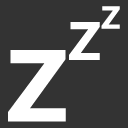
<style>
.page{position:relative;width:128px;height:128px;background:#333333}
.page>*{position:absolute;margin:0}
.t1{font:32px "SegoeUI-Bold";color:#ffffff}
.t2{font:54px "SegoeUI-Bold";color:#ffffff}
.t3{font:102px "SegoeUI-Bold";color:#ffffff}
</style>
<div class="page">
<p class="t1" style="left:101px;top:6px;width:19px;height:23px">Z</p>
<p class="t2" style="left:69px;top:22px;width:31px;height:38px">Z</p>
<p class="t3" style="left:8px;top:50px;width:58px;height:72px">Z</p>
</div>
